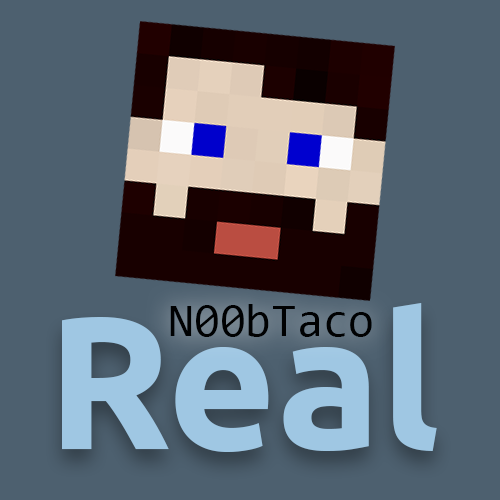
<style>
.page{position:relative;width:500px;height:500px;background:#4d606f}
.page>*{position:absolute;margin:0}
.t1{font:187.5px "Ubuntu-Bold";color:#9fc7e3}
.t2{font:46.9px "Consolas";color:#000102}
</style>
<div class="page">
<p class="t1" style="left:62px;top:303px;width:375px;height:149px">Real</p>
<p class="t2" style="left:170px;top:304px;width:202px;height:33px">N00bTaco</p>
</div>
